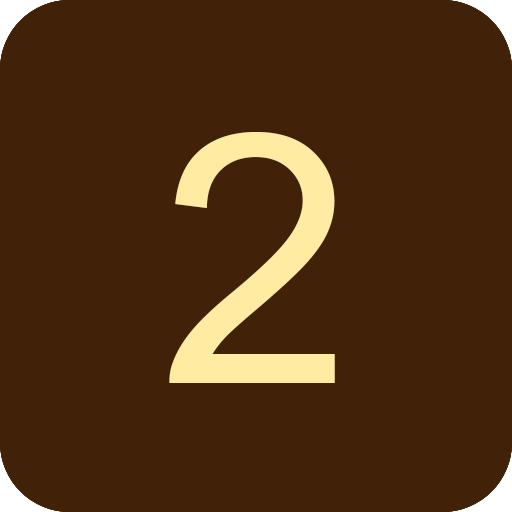
<style>
.page{position:relative;width:512px;height:512px;background:#412209}
.page>*{position:absolute;margin:0}
.t1{font:349px "ArialMT";color:#ffeba1}
</style>
<div class="page">
<p class="t1" style="left:169px;top:132px;width:166px;height:251px">2</p>
</div>
